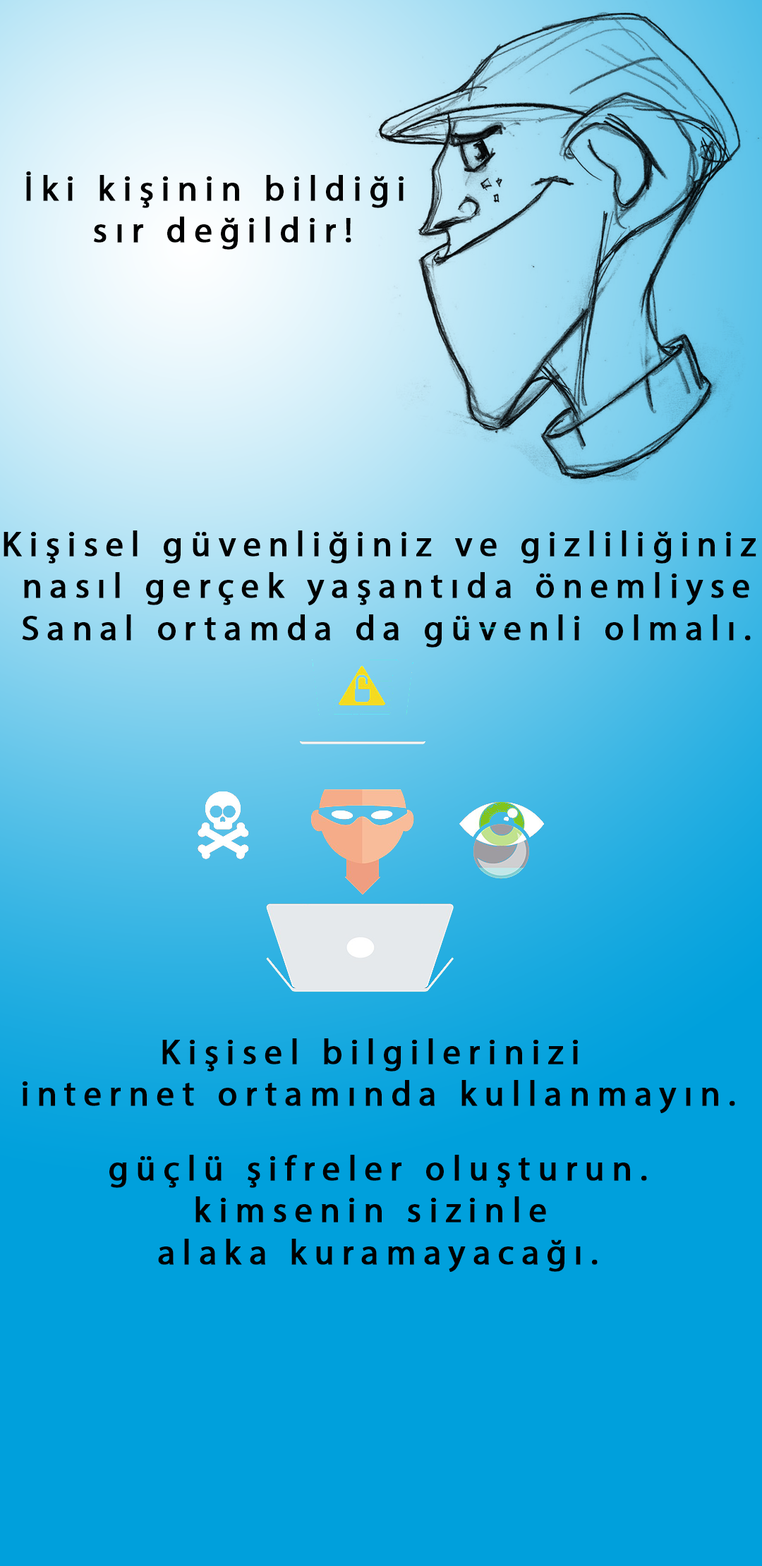
<style>
.page{position:relative;width:762px;height:1566px;background:#00a0dc}
.page>*{position:absolute;margin:0}
.t1{font:35.3px "MyriadPro-Regular";letter-spacing:0.2em;color:#000000;font-weight:bold}
</style>
<div class="page">
<p class="t1" style="left:26px;top:171px;width:377px;height:79px;text-align:center">İki kişinin bildiği<br> sır değildir!</p>
<p class="t1" style="left:4px;top:530px;width:752px;height:117px;text-align:center">Kişisel güvenliğiniz ve gizliliğiniz <br>nasıl gerçek yaşantıda önemliyse<br>Sanal ortamda da güvenli olmalı.</p>
<p class="t1" style="left:23px;top:1038px;width:712px;height:75px;text-align:center">Kişisel bilgilerinizi <br>internet ortamında kullanmayın.</p>
<p class="t1" style="left:109px;top:1154px;width:538px;height:118px;text-align:center">güçlü şifreler oluşturun.<br>kimsenin sizinle <br>alaka kuramayacağı.</p>
</div>
